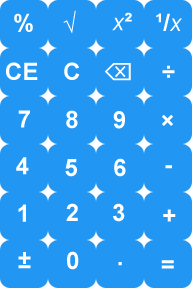
<style>
.page{position:relative;width:192px;height:288px;background:#2196f3}
.page>*{position:absolute;margin:0}
.t1{font:24px "Arial-BoldMT";color:#ffffff}
.t2{font:24px "Arial-ItalicMT";color:#ffffff}
</style>
<div class="page">
<p class="t1" style="left:14px;top:13px;width:19px;height:19px">%</p>
<p class="t1" style="left:63px;top:10px;width:13px;height:24px">√</p>
<p class="t2" style="left:112px;top:12px;width:20px;height:19px">x<span class="t1">²</span></p>
<p class="t1" style="left:156px;top:13px;width:26px;height:18px">¹/<span class="t2">x</span></p>
<p class="t1" style="left:6px;top:62px;width:32px;height:18px">CE</p>
<p class="t1" style="left:64px;top:62px;width:16px;height:18px">C</p>
<p class="t1" style="left:162px;top:65px;width:13px;height:13px">÷</p>
<p class="t1" style="left:18px;top:110px;width:12px;height:18px">7</p>
<p class="t1" style="left:66px;top:110px;width:12px;height:19px">8</p>
<p class="t1" style="left:113px;top:111px;width:12px;height:18px">9</p>
<p class="t1" style="left:162px;top:114px;width:11px;height:12px">×</p>
<p class="t1" style="left:16px;top:157px;width:13px;height:18px">4</p>
<p class="t1" style="left:65px;top:159px;width:12px;height:18px">5</p>
<p class="t1" style="left:114px;top:158px;width:12px;height:19px">6</p>
<p class="t1" style="left:165px;top:165px;width:7px;height:4px">-</p>
<p class="t1" style="left:18px;top:204px;width:8px;height:18px">1</p>
<p class="t1" style="left:66px;top:203px;width:12px;height:18px">2</p>
<p class="t1" style="left:113px;top:203px;width:12px;height:19px">3</p>
<p class="t1" style="left:163px;top:209px;width:13px;height:13px">+</p>
<p class="t1" style="left:18px;top:252px;width:13px;height:17px">±</p>
<p class="t1" style="left:67px;top:251px;width:12px;height:19px">0</p>
<p class="t1" style="left:118px;top:262px;width:4px;height:4px">.</p>
<p class="t1" style="left:161px;top:260px;width:13px;height:9px">=</p>
</div>
